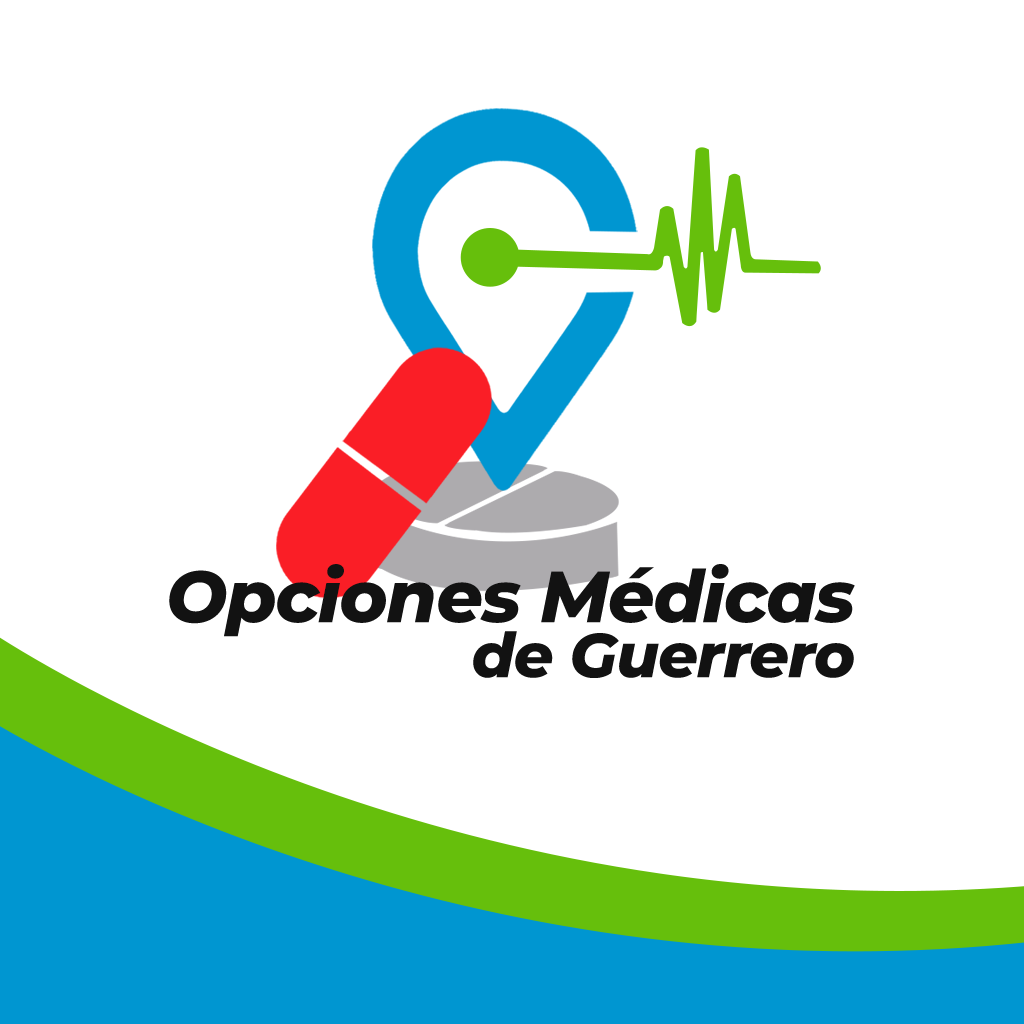
<style>
.page{position:relative;width:1024px;height:1024px;background:#ffffff}
.page>*{position:absolute;margin:0}
.t1{font:72.4px "Montserrat-ExtraBoldItalic";letter-spacing:-0.015em;color:#121212}
.t2{font:62px/55px "Montserrat-ExtraBoldItalic";letter-spacing:-0.015em;color:#121212}
</style>
<div class="page">
<p class="t1" style="left:169px;top:564px;width:686px;height:114px;text-align:right">Opciones Médicas<br><span class="t2">de Guerrero</span></p>
</div>
